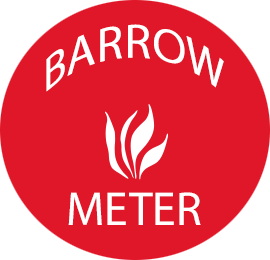
<style>
.page{position:relative;width:270px;height:260px;background:#df1728}
.page>*{position:absolute;margin:0}
.t1{font:48px "MyriadPro-Regular";color:#ffffff}
</style>
<div class="page">
<p class="t1" style="left:46px;top:24px;width:178px;height:68px">BARROW</p>
<p class="t1" style="left:68px;top:192px;width:133px;height:33px">METER</p>
</div>
